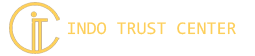
<style>
.page{position:relative;width:255px;height:56px;background:#ffffff}
.page>*{position:absolute;margin:0}
.t1{font:18.1px "Consolas";color:#fdcf5b}
</style>
<div class="page">
<p class="t1" style="left:67px;top:22px;width:169px;height:13px">INDO TRUST CENTER</p>
</div>
